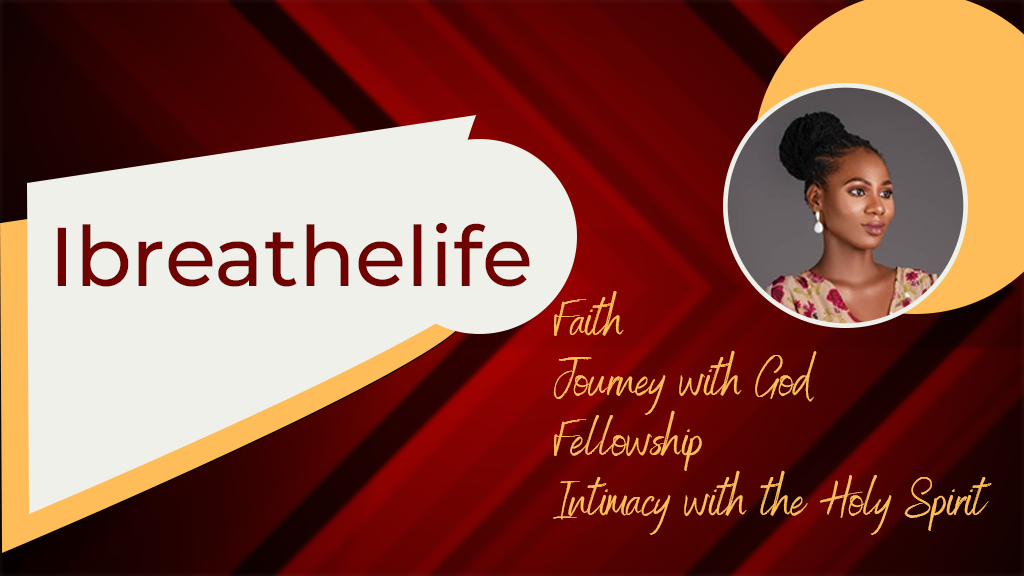
<style>
.page{position:relative;width:1024px;height:576px;background:#eff0ea}
.page>*{position:absolute;margin:0}
.t1{font:83.3px "Montserrat-Medium";color:#6f0101}
.t2{font:50px "Benedict";color:#febd59}
</style>
<div class="page">
<p class="t1" style="left:57px;top:223px;width:473px;height:64px">Ibreathelife</p>
<p class="t2" style="left:553px;top:291px;width:439px;height:244px">Faith<br>Journey with God<br>Fellowship<br>Intimacy with the Holy Spirit</p>
</div>
